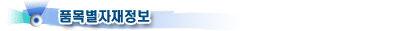
<style>
.page{position:relative;width:411px;height:31px;background:#ffffff}
.page>*{position:absolute;margin:0}
.t1{font:13px "H2hdrM";color:#004a80}
</style>
<div class="page">
<p class="t1" style="left:60px;top:10px;width:90px;height:13px">품목별자재정보</p>
</div>
